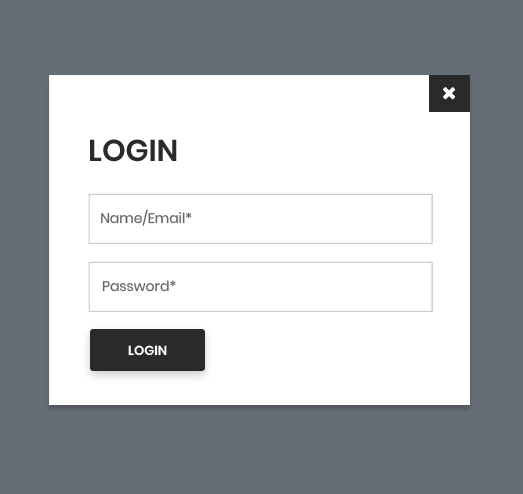
<style>
.page{position:relative;width:523px;height:494px;background:#ffffff}
.page>*{position:absolute;margin:0}
.t1{font:30px "Poppins-SemiBold";color:#2a2a2a;text-transform:uppercase}
.t2{font:14px "Poppins-Regular";color:#676767}
.t3{font:13px "Poppins-SemiBold";color:#ffffff;text-transform:uppercase}
</style>
<div class="page">
<p class="t1" style="left:90px;top:139px;width:87px;height:23px">login</p>
<p class="t2" style="left:101px;top:209px;width:91px;height:17px">Name/Email*</p>
<p class="t2" style="left:102px;top:280px;width:74px;height:12px">Password*</p>
<p class="t3" style="left:128px;top:345px;width:39px;height:11px">login</p>
</div>
